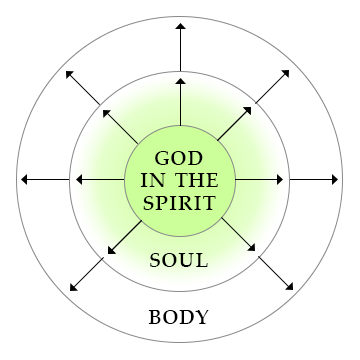
<style>
.page{position:relative;width:360px;height:360px;background:#ffffff}
.page>*{position:absolute;margin:0}
.t1{font:29.3px/22.8px "PalatinoLinotype-Roman";color:#000000;font-variant:small-caps}
.t2{font:29.3px "PalatinoLinotype-Roman";color:#000000;font-variant:small-caps}
</style>
<div class="page">
<p class="t1" style="left:140px;top:151px;width:78px;height:59px;text-align:center">god<br>in the<br>spirit</p>
<p class="t2" style="left:150px;top:253px;width:58px;height:14px">soul</p>
<p class="t2" style="left:148px;top:310px;width:61px;height:14px">body</p>
</div>
